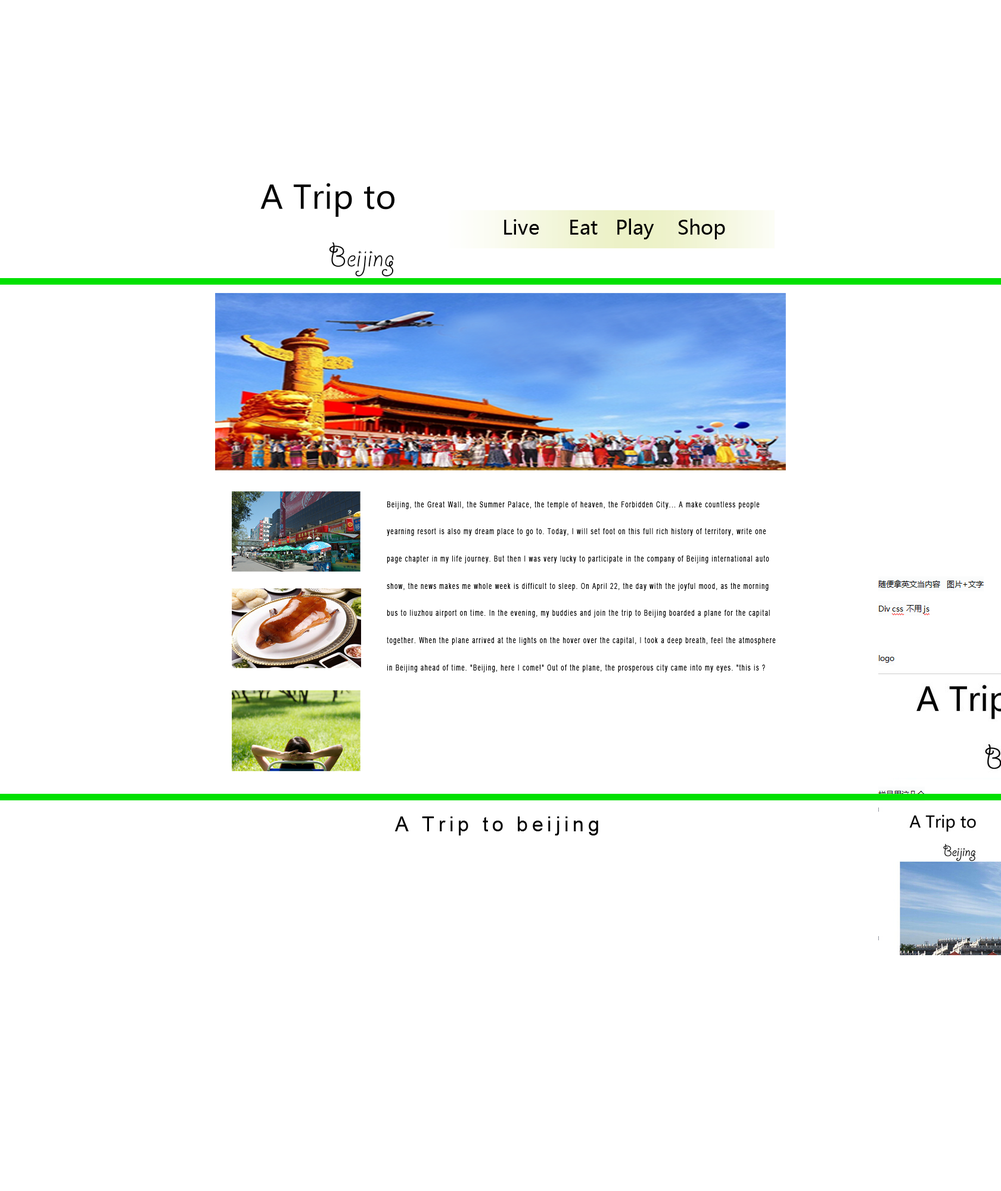
<style>
.page{position:relative;width:1001px;height:1191px;background:#ffffff}
.page>*{position:absolute;margin:0}
.t1{font:19.7px "MicrosoftYaHei";color:#000000}
.t2{font:8.3px/27.2px "ArialMT";letter-spacing:0.2em;color:#000000;scale:0.62 1}
.t3{font:20.1px "ArialMT";letter-spacing:0.2em;color:#000000}
</style>
<div class="page">
<p class="t1" style="left:504px;top:219px;width:221px;height:20px">Live     Eat   Play    Shop</p>
<p class="t2" style="left:387px;top:501px;width:389px;height:172px">Beijing, the Great Wall, the Summer Palace, the temple of heaven, the Forbidden City... A make countless people yearning resort is also my dream place to go to. Today, I will set foot on this full rich history of territory, write one page chapter in my life journey. But then I was very lucky to participate in the company of Beijing international auto show, the news makes me whole week is difficult to sleep. On April 22, the day with the joyful mood, as the morning bus to liuzhou airport on time. In the evening, my buddies and join the trip to Beijing boarded a plane for the capital together. When the plane arrived at the lights on the hover over the capital, I took a deep breath, feel the atmosphere in Beijing ahead of time. "Beijing, here I come!" Out of the plane, the prosperous city came into my eyes. "this is ?</p>
<p class="t3" style="left:394px;top:817px;width:204px;height:19px">A Trip to beijing</p>
</div>
